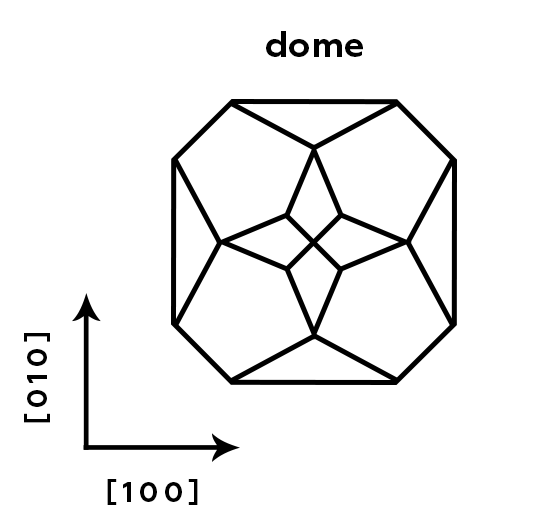
<style>
.page{position:relative;width:550px;height:528px;background:#ffffff}
.page>*{position:absolute;margin:0}
.t1{font:36px "Geometria-Bold";color:#000000}
.t2{font:28px "Geometria-Bold";letter-spacing:0.19em;color:#000000;text-transform:uppercase}
</style>
<div class="page">
<p class="t1" style="left:266px;top:31px;width:97px;height:26px">dome</p>
<p class="t2" style="left:24px;top:333px;width:26px;height:90px;rotate:-90deg">[010]</p>
<p class="t2" style="left:107px;top:479px;width:91px;height:26px">[100]</p>
</div>
